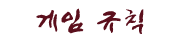
<style>
.page{position:relative;width:180px;height:40px;background:#ffffff}
.page>*{position:absolute;margin:0}
.t1{font:30px "JShinYeongBok-Regular";color:#5b0f1c}
</style>
<div class="page">
<p class="t1" style="left:36px;top:8px;width:108px;height:26px">게임 규칙</p>
</div>
